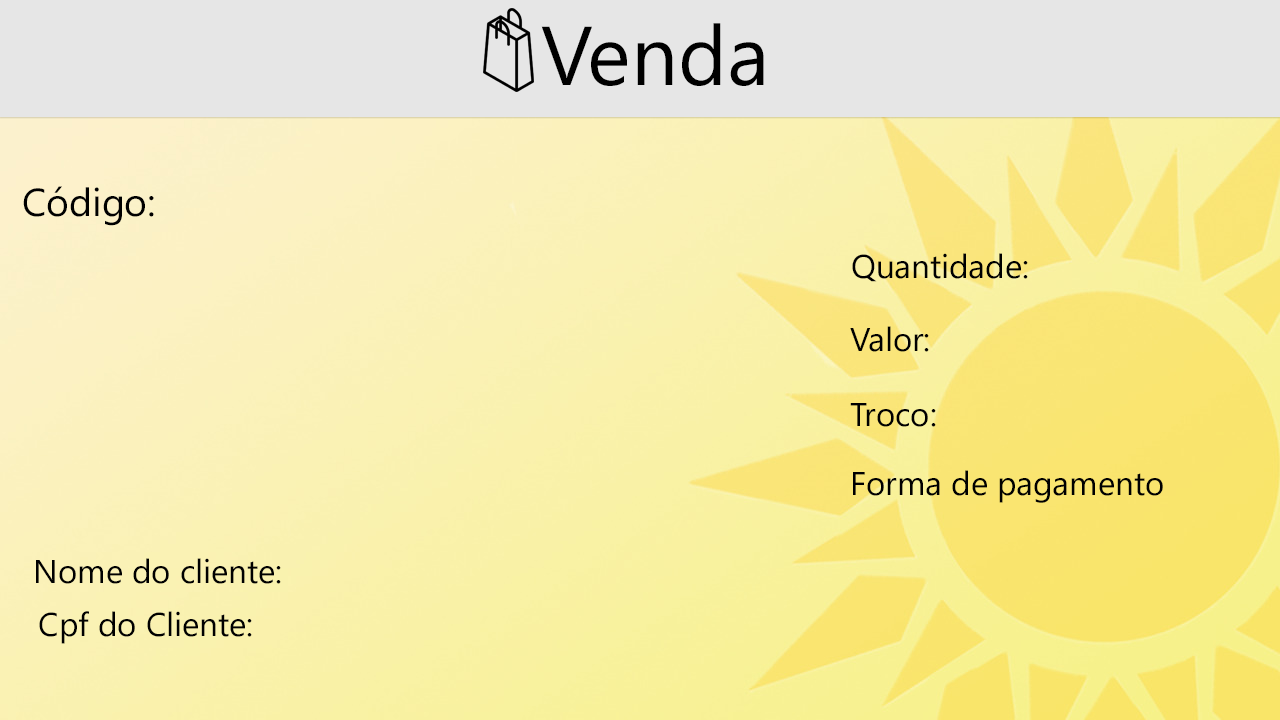
<style>
.page{position:relative;width:1280px;height:720px}
.page>*{position:absolute;margin:0}
.t1{font:83.3px "SegoeUI";color:#000000}
.t2{font:38.9px "SegoeUI";color:#000000}
.t3{font:33px "SegoeUI";color:#000000}
</style>
<div class="page">
<p class="t1" style="left:541px;top:23px;width:223px;height:63px">Venda</p>
<p class="t2" style="left:23px;top:186px;width:131px;height:40px">Código:</p>
<p class="t3" style="left:852px;top:253px;width:176px;height:29px">Quantidade:</p>
<p class="t3" style="left:850px;top:326px;width:79px;height:26px">Valor:</p>
<p class="t3" style="left:850px;top:403px;width:86px;height:24px">Troco:</p>
<p class="t3" style="left:853px;top:470px;width:310px;height:33px">Forma de pagamento</p>
<p class="t3" style="left:36px;top:558px;width:245px;height:26px">Nome do cliente:</p>
<p class="t3" style="left:39px;top:611px;width:213px;height:33px">Cpf do Cliente:</p>
</div>
